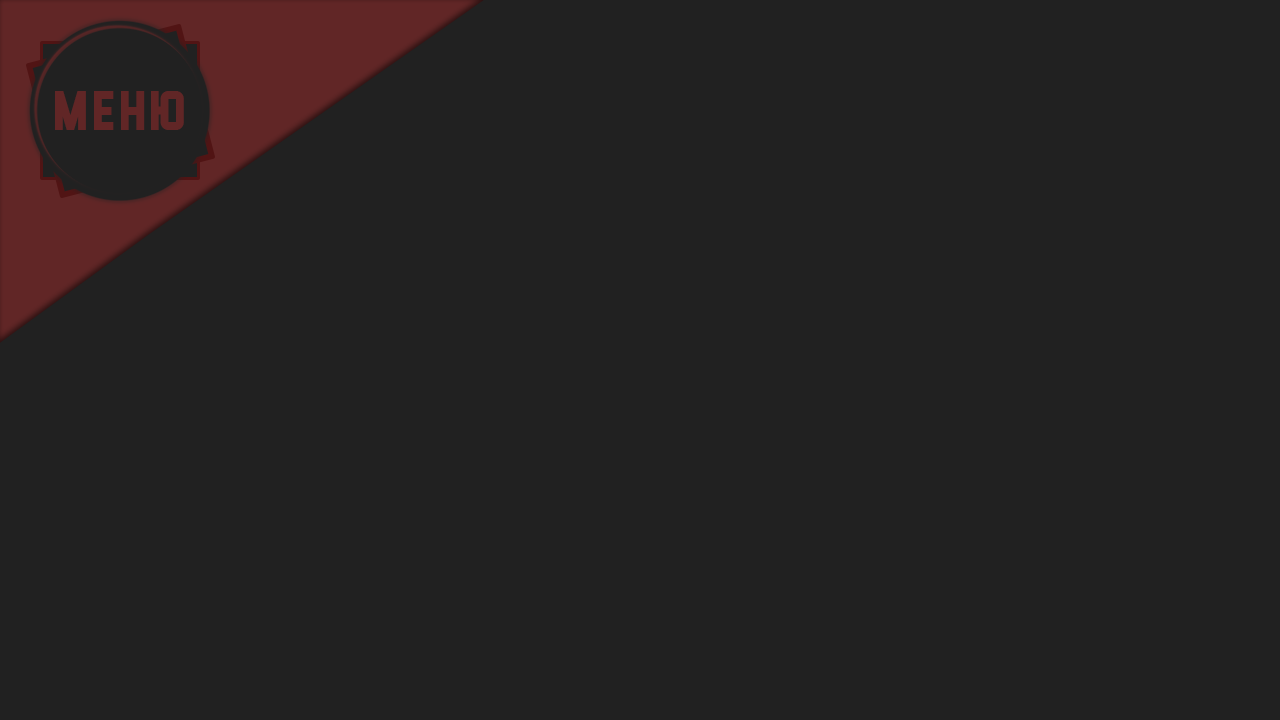
<style>
.page{position:relative;width:1280px;height:720px;background:#212121}
.page>*{position:absolute;margin:0}
.t1{font:50px "Natasha";color:#612626}
</style>
<div class="page">
<p class="t1" style="left:55px;top:91px;width:129px;height:39px">Меню</p>
</div>
